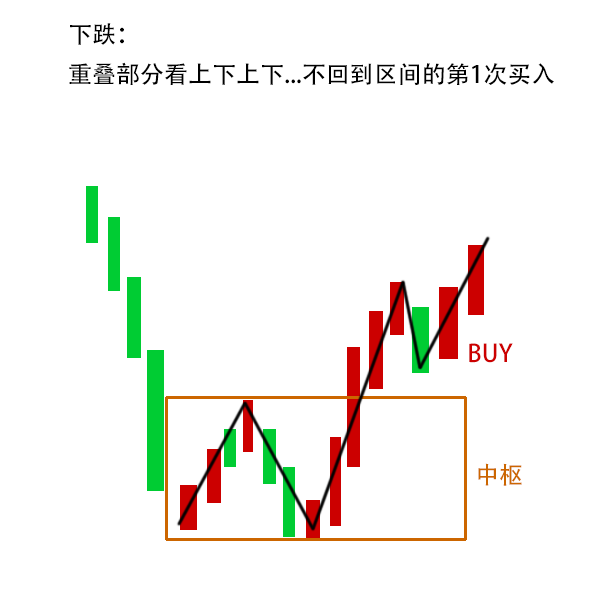
<style>
.page{position:relative;width:600px;height:600px;background:#ffffff}
.page>*{position:absolute;margin:0}
.t1{font:24px/40px "AdobeHeitiStd-Regular";color:#000000;text-transform:uppercase}
.t2{font:24px "AdobeHeitiStd-Regular";color:#cc0000;text-transform:uppercase}
.t3{font:24px "AdobeHeitiStd-Regular";color:#cc6600;text-transform:uppercase}
</style>
<div class="page">
<p class="t1" style="left:69px;top:23px;width:485px;height:63px">下跌：<br>重叠部分看上下上下...不回到区间的第1次买入</p>
<p class="t2" style="left:469px;top:343px;width:44px;height:20px">buy</p>
<p class="t3" style="left:478px;top:463px;width:44px;height:23px">中枢</p>
</div>
